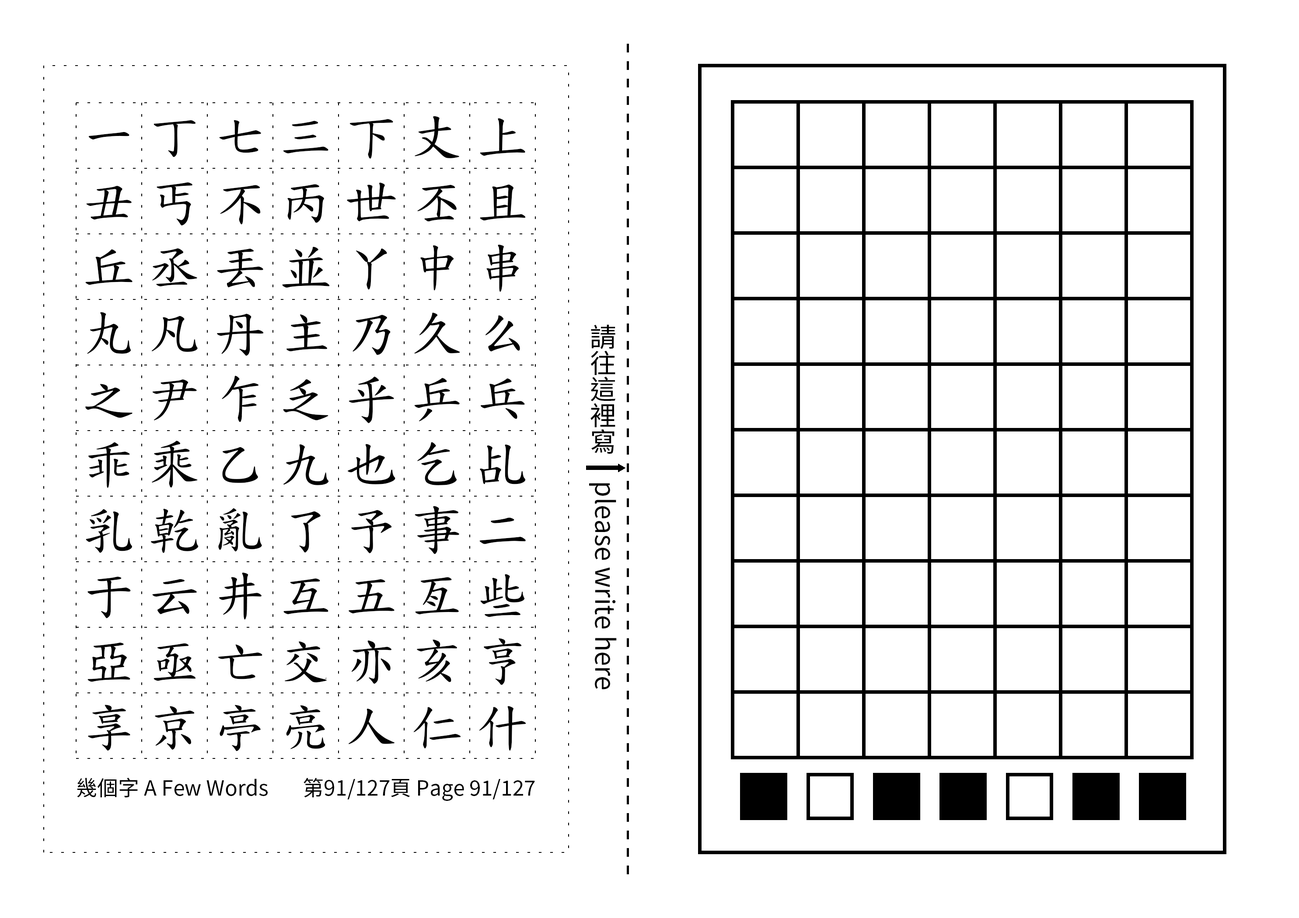
<style>
.page{position:relative;width:1299px;height:918px;background:#ffffff}
.page>*{position:absolute;margin:0}
.t1{font:52.5px/65.6px "TW-Kai-98_1";letter-spacing:0.25em;color:#000000}
.t2{font:26.2px "SourceHanSansTC-Regular";color:#000000}
.t3{font:21px "SourceHanSansTC-Regular";color:#000000}
</style>
<div class="page">
<p class="t1" style="left:85px;top:116px;width:441px;height:636px;text-align:center">一丁七三下丈上丑丐不丙世丕且丘丞丟並丫中串丸凡丹主乃久么之尹乍乏乎乒乓乖乘乙九也乞乩乳乾亂了予事二于云井互五亙些亞亟亡交亦亥亨享京亭亮人仁什</p>
<p class="t2" style="left:589px;top:324px;width:28px;height:366px;text-align:center">請往這裡寫　please write here</p>
<p class="t3" style="left:77px;top:778px;width:191px;height:20px">幾個字 A Few Words</p>
<p class="t3" style="left:303px;top:778px;width:232px;height:23px">第91/127頁 Page 91/127</p>
</div>
